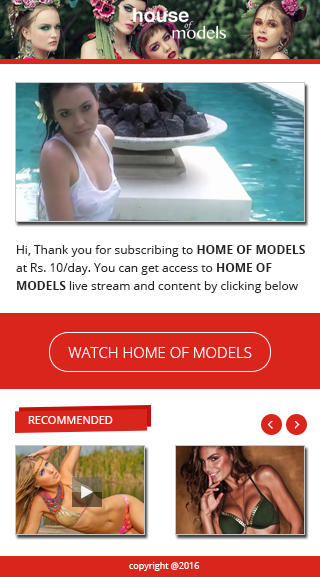
<style>
.page{position:relative;width:320px;height:577px;background:#ffffff}
.page>*{position:absolute;margin:0}
.t1{font:12px/18px "OpenSans";color:#252525}
.t2{font:12px/18px "OpenSans-Bold";color:#252525}
.t3{font:15px "OpenSans-Light";color:#fffefe}
.t4{font:11px "OpenSans";color:#ffffff}
.t5{font:9px "OpenSans";color:#fefefe}
</style>
<div class="page">
<p class="t1" style="left:16px;top:245px;width:289px;height:48px">Hi, Thank you for subscribing to <span class="t2">HOME OF MODELS</span> at Rs. 10/day. You can get access to <span class="t2">HOME OF MODELS</span> live stream and content by clicking below</p>
<p class="t3" style="left:68px;top:347px;width:184px;height:11px">WATCH HOME OF MODELS</p>
<p class="t4" style="left:28px;top:416px;width:85px;height:8px">RECOMMENDED</p>
<p class="t5" style="left:129px;top:562px;width:71px;height:9px">copyright @2016</p>
</div>
